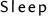
<style>
.page{position:relative;width:48px;height:16px;background:#ffffff}
.page>*{position:absolute;margin:0}
.t1{font:16px "Amira-Roman";letter-spacing:0.16em;color:#000000}
</style>
<div class="page">
<p class="t1" style="left:0px;top:0px;width:47px;height:16px;opacity:0.96">Sleep</p>
</div>
